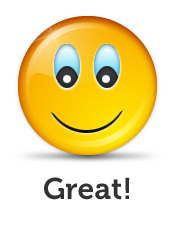
<style>
.page{position:relative;width:174px;height:230px;background:#ffffff}
.page>*{position:absolute;margin:0}
.t1{font:30px "Museo-700";color:#333333}
</style>
<div class="page">
<p class="t1" style="left:44px;top:177px;width:86px;height:23px">Great!</p>
</div>
